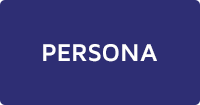
<style>
.page{position:relative;width:200px;height:105px;background:#2e2e74}
.page>*{position:absolute;margin:0}
.t1{font:25px "MavenProBold";color:#ffffff}
</style>
<div class="page">
<p class="t1" style="left:43px;top:44px;width:114px;height:18px">PERSONA</p>
</div>
